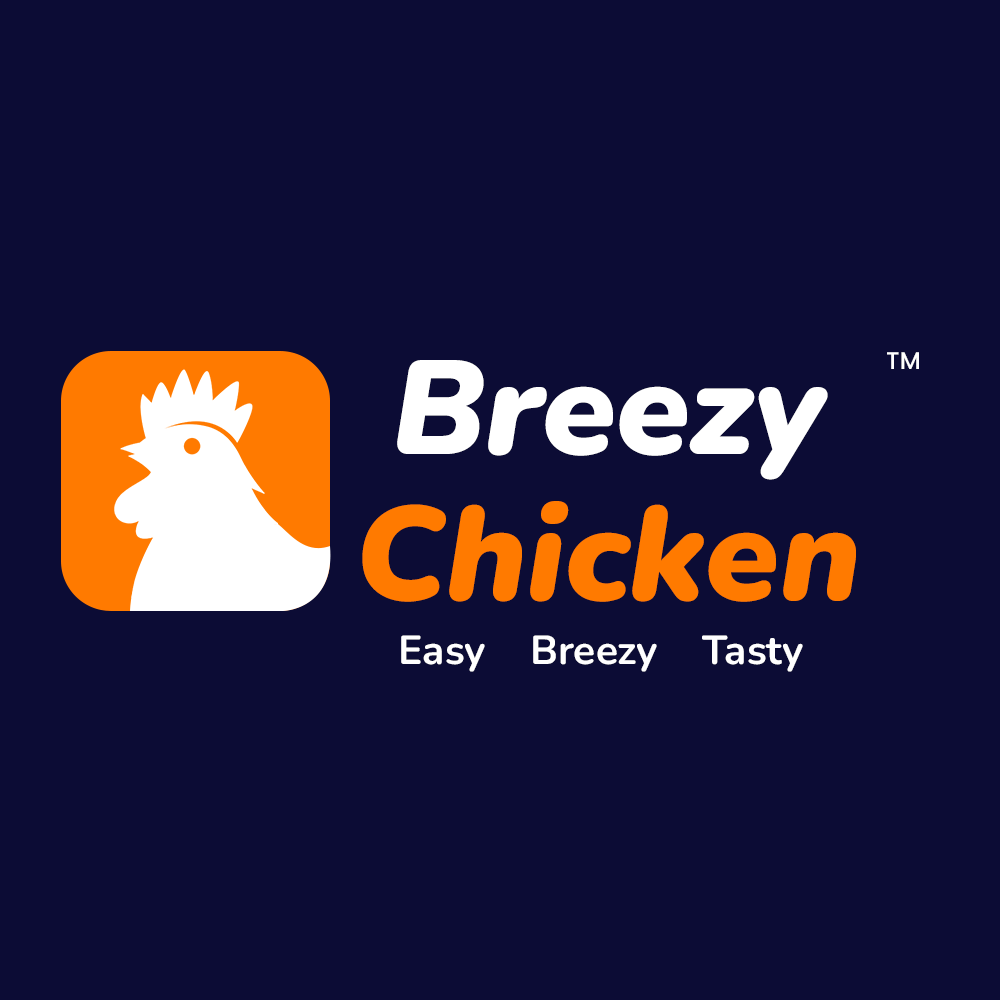
<style>
.page{position:relative;width:1000px;height:1000px;background:#0c0c35}
.page>*{position:absolute;margin:0}
.t1{font:23.9px "Poppins-Medium";color:#ffffff}
.t2{font:133.1px/145.5px "NunitoItalic-BlackItalic";color:#ff7a00}
.t3{font:133.1px/145.5px "NunitoItalic-BlackItalic";color:#ff5c5c}
.t4{font:133.1px/145.5px "NunitoItalic-BlackItalic";color:#ffffff}
.t5{font:40.5px "Nunito-Bold";color:#ffffff}
</style>
<div class="page">
<p class="t1" style="left:887px;top:352px;width:32px;height:17px">TM</p>
<p class="t2" style="left:362px;top:360px;width:494px;height:242px"><span class="t3"> </span><span class="t4">Breezy<br></span>Chicken</p>
<p class="t5" style="left:401px;top:635px;width:402px;height:37px">Easy    Breezy    Tasty</p>
</div>
